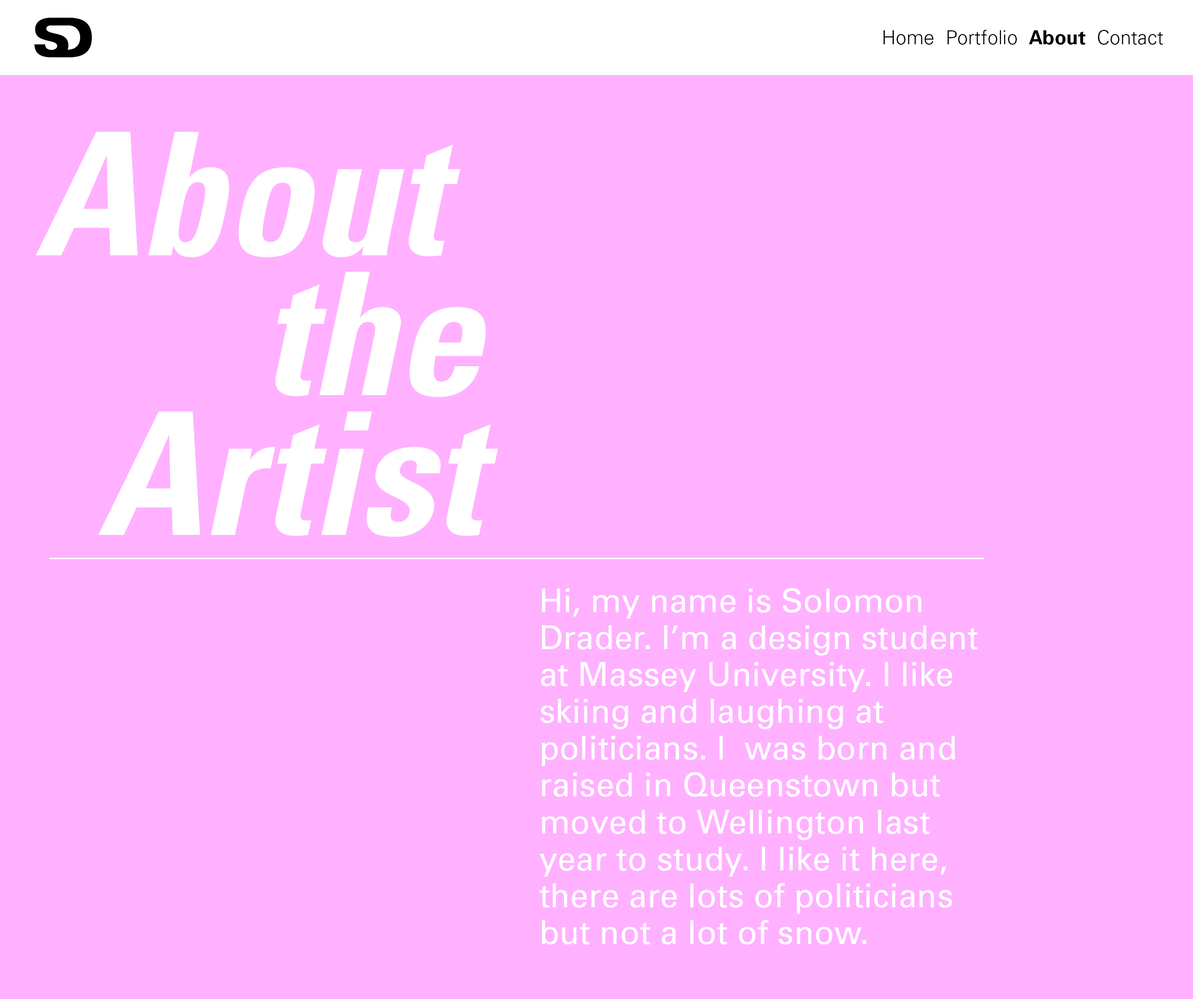
<style>
.page{position:relative;width:1193px;height:999px;background:#ffb1ff}
.page>*{position:absolute;margin:0}
.t1{font:19.4px "Univers-Light";color:#000000}
.t2{font:19.4px "Univers-Bold";color:#000000}
.t3{font:171px/139.8px "Univers-CondensedBoldOblique";color:#ffffff}
.t4{font:171px/139.8px "Univers-CondensedBoldOblique";letter-spacing:0.025em;color:#ffffff}
.t5{font:33px/36.9px "Univers";color:#ffffff}
</style>
<div class="page">
<p class="t1" style="left:884px;top:30px;width:279px;height:15px">Home  Portfolio  <span class="t2">About</span>  Contact</p>
<p class="t3" style="left:35px;top:132px;width:463px;height:405px;text-align:right">About <br>the<br>A<span class="t4">r</span>tist</p>
<p class="t5" style="left:540px;top:588px;width:438px;height:357px">Hi, my name is Solomon Drader. I’m a design student at Massey University. I like skiing and laughing at politicians. I  was born and raised in Queenstown but moved to Wellington last year to study. I like it here, there are lots of politicians but not a lot of snow.</p>
</div>
